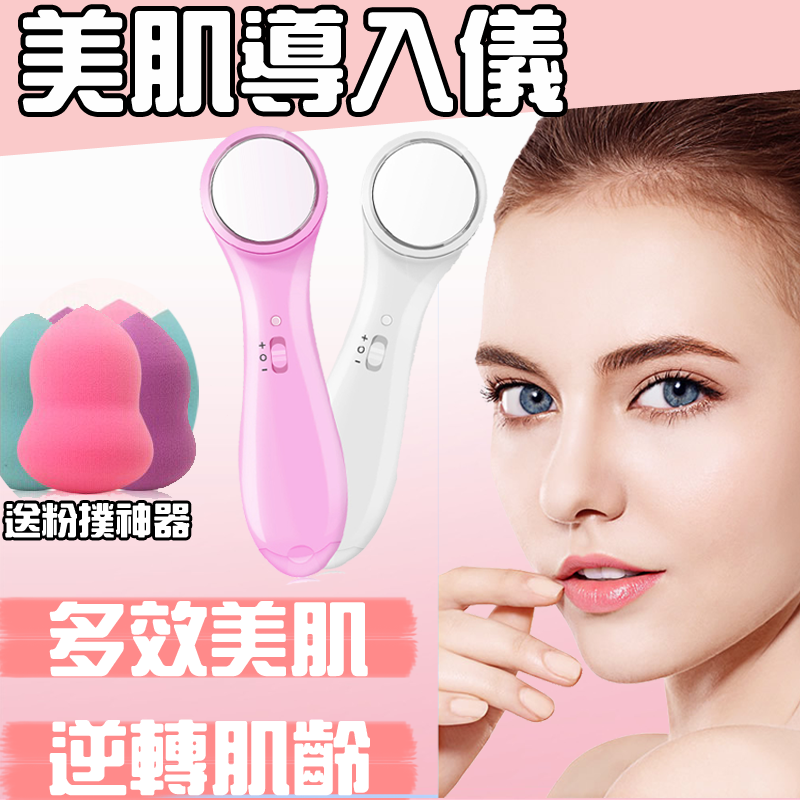
<style>
.page{position:relative;width:800px;height:800px}
.page>*{position:absolute;margin:0}
.t1{font:106.7px "HanWangZonYi";color:#fefefe;font-weight:bold}
.t2{font:36.2px "HanWangZonYi";color:#ffffff;font-weight:bold}
.t3{font:78.7px "HanWangZonYi";color:#ffffff;font-weight:bold}
.t4{font:79.3px "HanWangZonYi";color:#ffffff;font-weight:bold}
</style>
<div class="page">
<p class="t1" style="left:22px;top:9px;width:541px;height:103px">美肌導入儀</p>
<p class="t2" style="left:5px;top:503px;width:185px;height:35px">送粉撲神器</p>
<p class="t3" style="left:49px;top:601px;width:319px;height:76px">多效美肌</p>
<p class="t4" style="left:49px;top:719px;width:321px;height:77px">逆轉肌齡</p>
</div>
